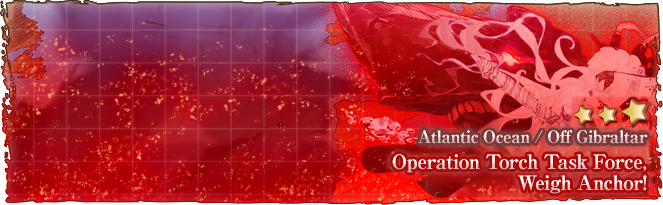
<style>
.page{position:relative;width:663px;height:205px}
.page>*{position:absolute;margin:0}
.t1{font:17px "RyuminPro-ExBold";letter-spacing:-0.04em}
.t2{font:20px "RyuminPro-ExBold";letter-spacing:-0.04em}
</style>
<div class="page">
<p class="t1" style="left:418px;top:130px;width:230px;height:14px">Atlantic Ocean / Off Gibraltar</p>
<p class="t2" style="left:392px;top:154px;width:255px;height:19px">Operation Torch Task Force,</p>
<p class="t2" style="left:518px;top:175px;width:129px;height:19px">Weigh Anchor!</p>
</div>
